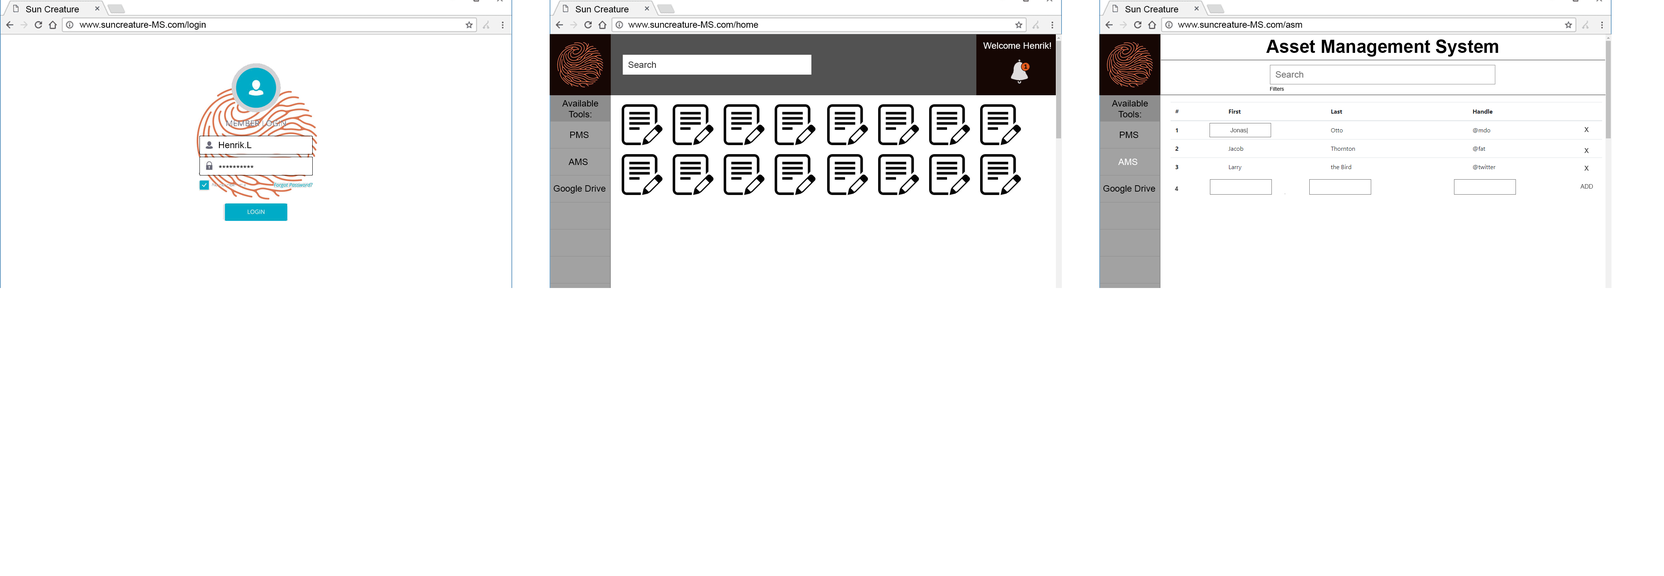
<style>
.page{position:relative;width:1664px;height:576px;background:#ffffff}
.page>*{position:absolute;margin:0}
.t1{font:9px "ArialMT";color:#000000}
.t2{font:18px "Arial-BoldMT";color:#000000}
.t3{font:9px "ArialMT";color:#ffffff}
.t4{font:9px "ArialMT";color:#363636}
.t5{font:9px "ArialMT";color:#6f6f6f}
.t6{font:5.2px "ArialMT";color:#000000}
.t7{font:6px "ArialMT";color:#454545}
.t8{font:9px "ArialMT";color:#454545}
.t9{font:6px "Arial-BoldMT";color:#454545}
</style>
<div class="page">
<p class="t1" style="left:26px;top:6px;width:53px;height:6px">Sun Creature</p>
<p class="t1" style="left:576px;top:6px;width:53px;height:6px">Sun Creature</p>
<p class="t1" style="left:1125px;top:6px;width:54px;height:6px">Sun Creature</p>
<p class="t1" style="left:80px;top:21px;width:126px;height:9px">www.suncreature-MS.com/login</p>
<p class="t1" style="left:628px;top:21px;width:130px;height:7px">www.suncreature-MS.com/home</p>
<p class="t1" style="left:1178px;top:21px;width:124px;height:7px">www.suncreature-MS.com/asm</p>
<p class="t2" style="left:1266px;top:39px;width:232px;height:18px">Asset Management System</p>
<p class="t3" style="left:983px;top:42px;width:68px;height:7px">Welcome Henrik!</p>
<p class="t4" style="left:628px;top:62px;width:28px;height:6px">Search</p>
<p class="t5" style="left:1276px;top:71px;width:28px;height:7px">Search</p>
<p class="t6" style="left:1270px;top:87px;width:14px;height:4px">Filters</p>
<p class="t1" style="left:562px;top:100px;width:36px;height:17px;text-align:center">Available<br>Tools:</p>
<p class="t1" style="left:1112px;top:100px;width:36px;height:17px;text-align:center">Available<br>Tools:</p>
<p class="t1" style="left:570px;top:132px;width:19px;height:6px">PMS</p>
<p class="t1" style="left:1120px;top:132px;width:18px;height:6px">PMS</p>
<p class="t7" style="left:1230px;top:128px;width:18px;height:6px">Jonas|</p>
<p class="t8" style="left:1584px;top:127px;width:5px;height:5px">x</p>
<p class="t1" style="left:219px;top:142px;width:33px;height:6px">Henrik.L</p>
<p class="t8" style="left:1584px;top:148px;width:5px;height:5px">x</p>
<p class="t1" style="left:568px;top:159px;width:20px;height:6px">AMS</p>
<p class="t3" style="left:1118px;top:159px;width:20px;height:6px">AMS</p>
<p class="t1" style="left:219px;top:165px;width:35px;height:3px">**********</p>
<p class="t8" style="left:1584px;top:166px;width:5px;height:5px">x</p>
<p class="t1" style="left:554px;top:185px;width:52px;height:9px">Google Drive</p>
<p class="t1" style="left:1103px;top:185px;width:52px;height:9px">Google Drive</p>
<p class="t7" style="left:1581px;top:184px;width:12px;height:5px">ADD</p>
<p class="t9" style="left:1175px;top:186px;width:4px;height:5px">4</p>
</div>
